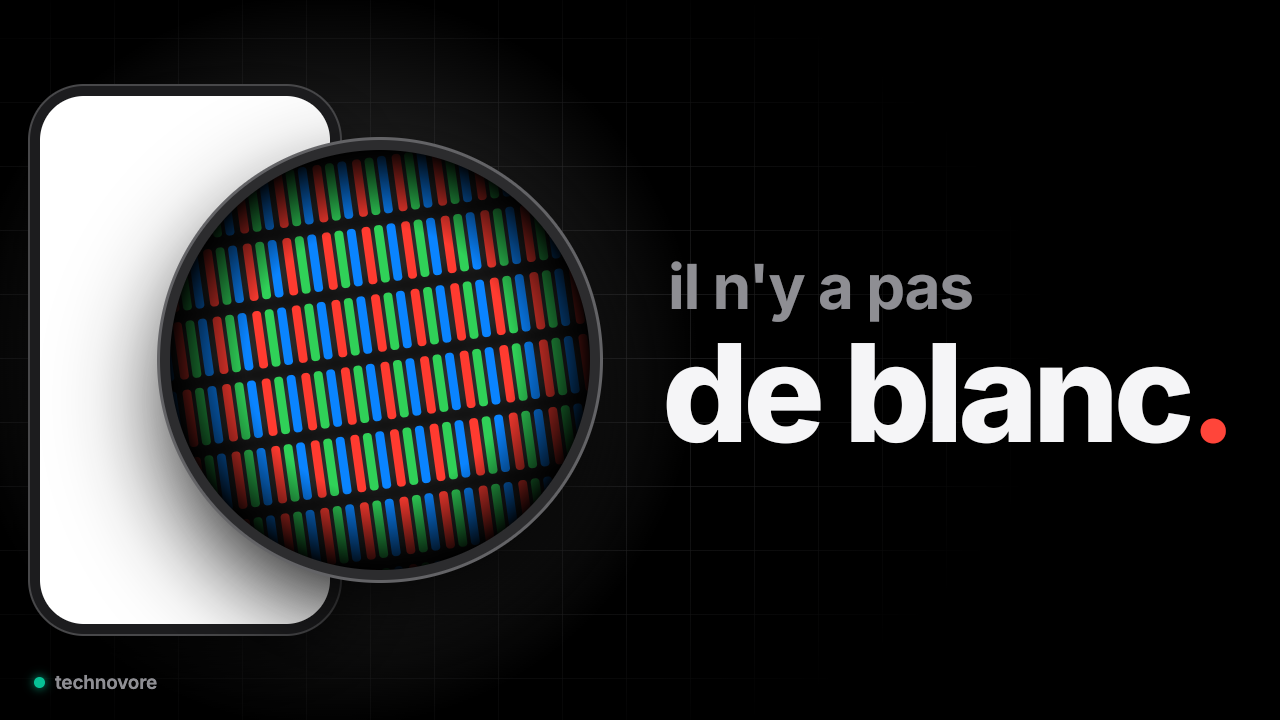
<style>
.page{position:relative;width:1280px;height:720px;background:#000000}
.page>*{position:absolute;margin:0}
.t1{font:62px "Inter-Bold";letter-spacing:-0.02em;color:#8e8e93}
.t2{font:136px "Inter-ExtraBold";letter-spacing:-0.04em;color:#f5f5f7}
.t3{font:136px "Inter-ExtraBold";letter-spacing:-0.04em;color:#ff453a}
</style>
<div class="page">
<p class="t1" style="left:670px;top:261px;width:303px;height:62px">il n'y a pas</p>
<p class="t2" style="left:665px;top:343px;width:562px;height:102px">de blanc<span class="t3">.</span></p>
</div>
